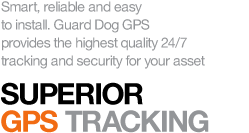
<style>
.page{position:relative;width:249px;height:133px;background:#ffffff}
.page>*{position:absolute;margin:0}
.t1{font:14px/18px "HelveticaNeue";letter-spacing:-0.04em;color:#939598}
.t2{font:29.6px/27.3px "HelveticaNeue-Bold";letter-spacing:-0.04em;color:#000000}
.t3{font:29.6px/27.3px "HelveticaNeue-Bold";letter-spacing:-0.04em;color:#f16b13}
.t4{font:29.6px/27.3px "HelveticaNeue-Bold";letter-spacing:-0.04em;color:#939598}
</style>
<div class="page">
<p class="t1" style="left:1px;top:1px;width:204px;height:68px">Smart, reliable and easy <br>to install. Guard Dog GPS<br>provides the highest quality 24/7<br>tracking and security for your asset</p>
<p class="t2" style="left:1px;top:82px;width:208px;height:51px">SUPERIOR<br><span class="t3">GPS </span><span class="t4">TRACKING</span></p>
</div>
